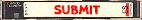
<style>
.page{position:relative;width:142px;height:20px}
.page>*{position:absolute;margin:0}
.t1{font:13.5px "CabinSketch-Bold";color:#ff0000}
</style>
<div class="page">
<p class="t1" style="left:54px;top:4px;width:46px;height:11px">SUBMIT</p>
</div>
